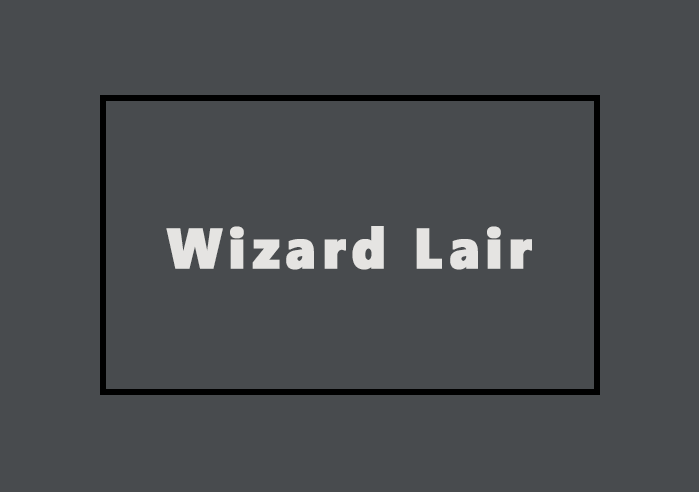
<style>
.page{position:relative;width:699px;height:492px;background:#484b4e}
.page>*{position:absolute;margin:0}
.t1{font:56.7px "SegoeWP-Black";letter-spacing:0.1em;color:#e5e4e2;font-weight:bold;scale:0.93 1}
</style>
<div class="page">
<p class="t1" style="left:166px;top:226px;width:366px;height:44px">Wizard Lair</p>
</div>
